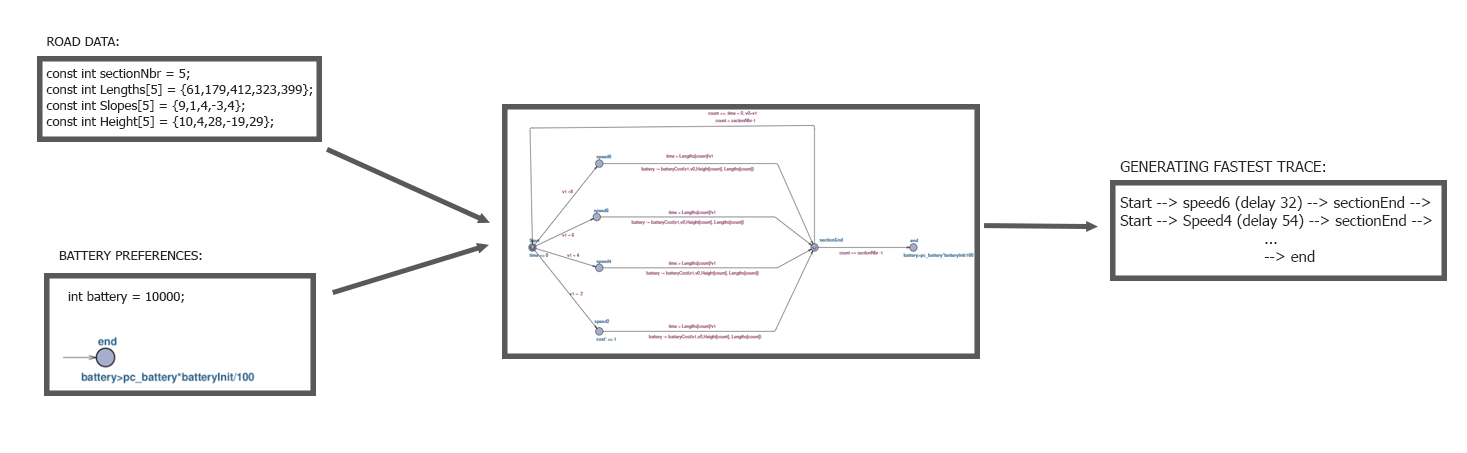
<style>
.page{position:relative;width:1467px;height:453px;background:#ffffff}
.page>*{position:absolute;margin:0}
.t1{font:13.3px "Tahoma";color:#262626}
.t2{font:15px "Tahoma";color:#262626}
.t3{font:13px "Tahoma";color:#262626}
</style>
<div class="page">
<p class="t1" style="left:46px;top:37px;width:267px;height:92px">ROAD DATA:<br><br>const int sectionNbr = 5; <br>const int Lengths[5] = {61,179,412,323,399}; <br>const int Slopes[5] = {9,1,4,-3,4}; <br>const int Height[5] = {10,4,28,-19,29};</p>
<p class="t2" style="left:1120px;top:161px;width:312px;height:101px">GENERATING FASTEST TRACE:<br><br>Start --&gt; speed6 (delay 32) --&gt; sectionEnd --&gt;<br>Start --&gt; Speed4 (delay 54) --&gt; sectionEnd --&gt;<br>    ...<br>    --&gt; end</p>
<p class="t3" style="left:59px;top:251px;width:143px;height:9px">BATTERY PREFERENCES:</p>
<p class="t3" style="left:68px;top:291px;width:116px;height:13px">int battery = 10000;</p>
</div>
